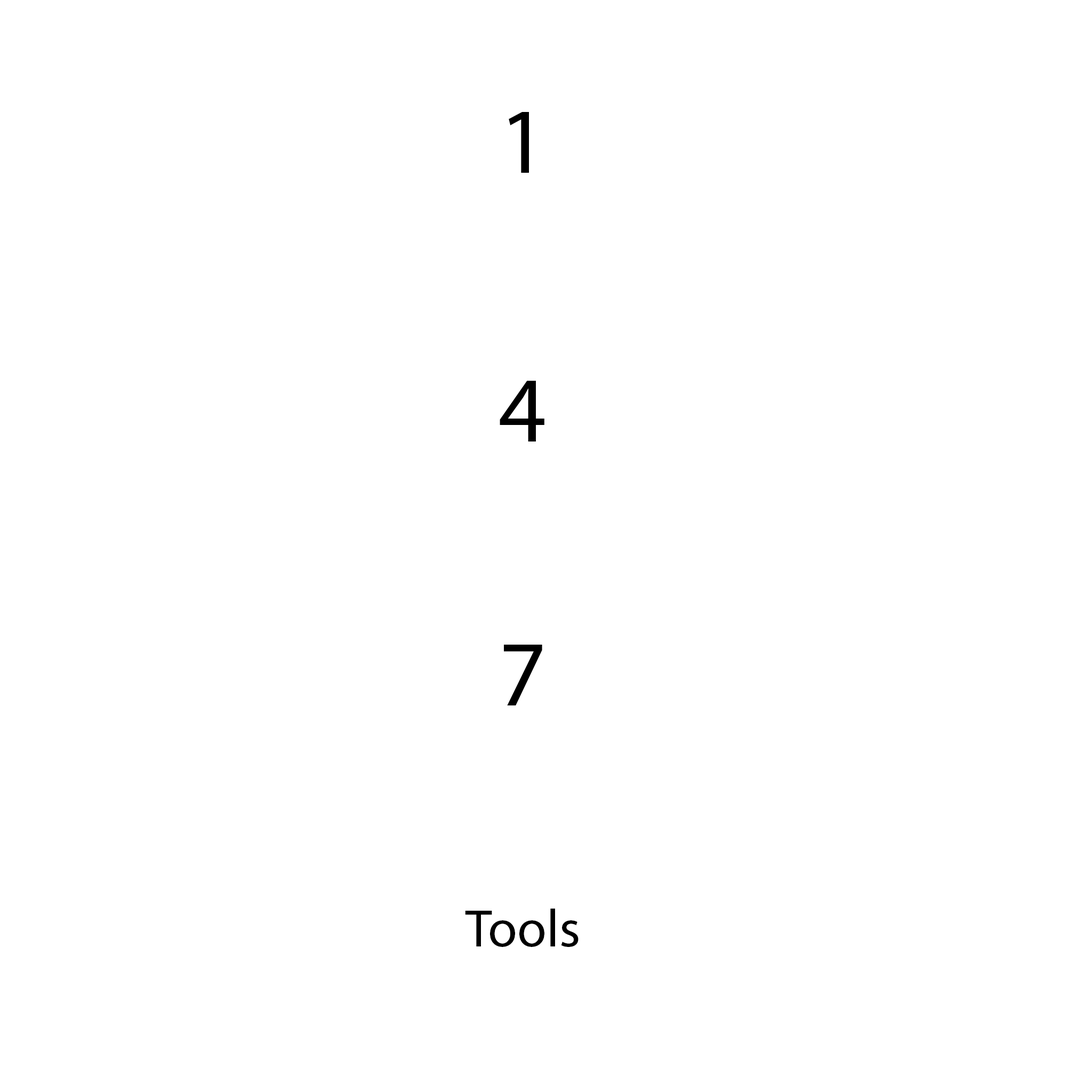
<style>
.page{position:relative;width:1092px;height:1092px;background:#ffffff}
.page>*{position:absolute;margin:0}
.t1{font:93.3px "MyriadPro-Regular";color:#000000}
.t2{font:53.3px "MyriadPro-Regular";color:#000000}
</style>
<div class="page">
<p class="t1" style="left:509px;top:112px;width:20px;height:61px">1</p>
<p class="t1" style="left:500px;top:381px;width:44px;height:60px">4</p>
<p class="t1" style="left:504px;top:645px;width:38px;height:60px">7</p>
<p class="t2" style="left:465px;top:909px;width:114px;height:38px">Tools</p>
</div>
